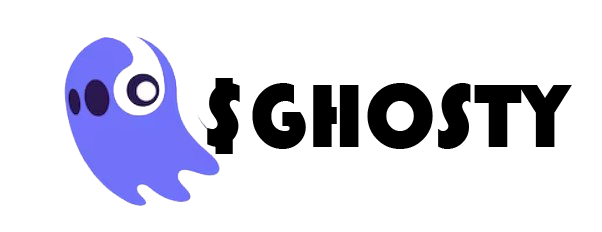
<style>
.page{position:relative;width:602px;height:232px;background:#ffffff}
.page>*{position:absolute;margin:0}
.t1{font:93.3px "Bauhaus93";color:#000000}
</style>
<div class="page">
<p class="t1" style="left:207px;top:78px;width:365px;height:76px">$GHOSTY</p>
</div>
